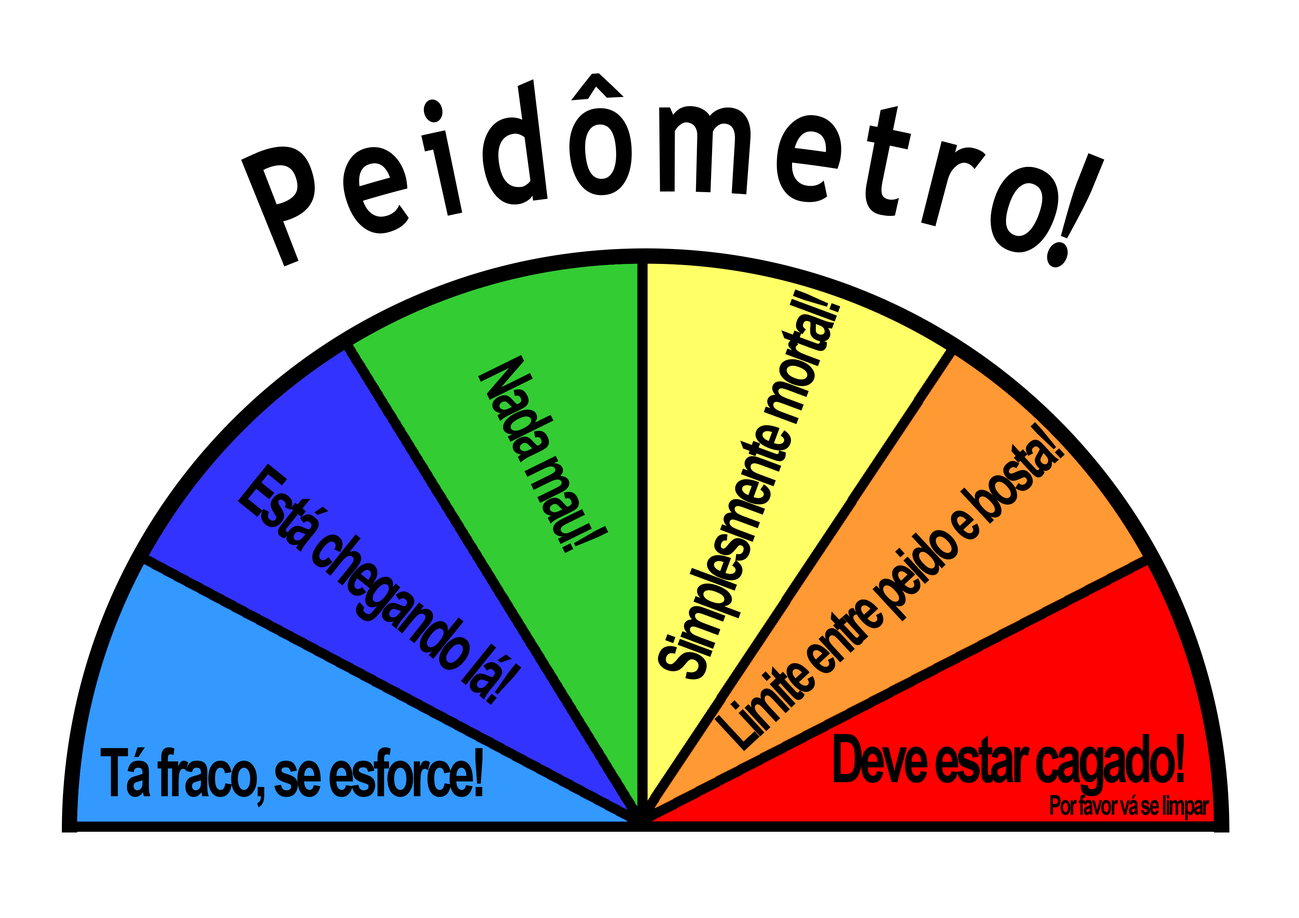
<style>
.page{position:relative;width:1299px;height:918px;background:#ffffff}
.page>*{position:absolute;margin:0}
.t1{font:161px "TrebuchetMS-Bold";letter-spacing:-0.085em;color:#000000;scale:0.69 1}
.t2{font:67.1px "Arial-BoldMT";letter-spacing:-0.085em;color:#000000;scale:0.69 1}
.t3{font:61.4px "Arial-BoldMT";letter-spacing:-0.085em;color:#000000;scale:0.69 1}
.t4{font:67.2px "Arial-BoldMT";letter-spacing:-0.085em;color:#000000;scale:0.72 1}
.t5{font:26.8px "Arial-BoldMT";letter-spacing:-0.085em;color:#000000;scale:0.69 1}
</style>
<div class="page">
<p class="t1" style="left:241px;top:73px;width:863px;height:195px">P e i d ô m e t r o!</p>
<p class="t2" style="left:658px;top:289px;width:182px;height:391px;rotate:-70deg">Simplesmente mortal!</p>
<p class="t2" style="left:478px;top:355px;width:130px;height:198px;rotate:64deg">Nada mau!</p>
<p class="t3" style="left:714px;top:422px;width:351px;height:330px;rotate:-43deg">Limite entre peido e bosta!</p>
<p class="t2" style="left:238px;top:464px;width:283px;height:241px;rotate:39deg">Está chegando lá!</p>
<p class="t2" style="left:834px;top:734px;width:350px;height:62px">Deve estar cagado!</p>
<p class="t4" style="left:100px;top:747px;width:382px;height:60px">Tá fraco, se esforce!</p>
<p class="t5" style="left:1050px;top:795px;width:159px;height:25px">Por favor vá se limpar</p>
</div>
